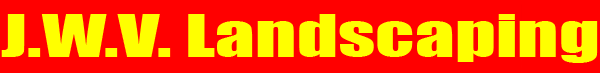
<style>
.page{position:relative;width:600px;height:73px;background:#ff0000}
.page>*{position:absolute;margin:0}
.t1{font:54.6px "Impact";color:#ffff00;scale:1.45 1}
</style>
<div class="page">
<p class="t1" style="left:1px;top:14px;width:597px;height:49px">J.W.V. Landscaping</p>
</div>
